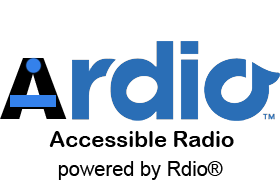
<style>
.page{position:relative;width:280px;height:180px;background:#ffffff}
.page>*{position:absolute;margin:0}
.t1{font:85px "Arial-Black";color:#000000}
.t2{font:22px "ArialRoundedMTBold";color:#000000}
.t3{font:20px "ArialMT";color:#000000}
</style>
<div class="page">
<p class="t1" style="left:0px;top:58px;width:67px;height:61px">A</p>
<p class="t2" style="left:49px;top:131px;width:185px;height:49px"><span class="t3">       </span>Accessible Radio<br>       <span class="t3">powered by Rdio®</span></p>
</div>
